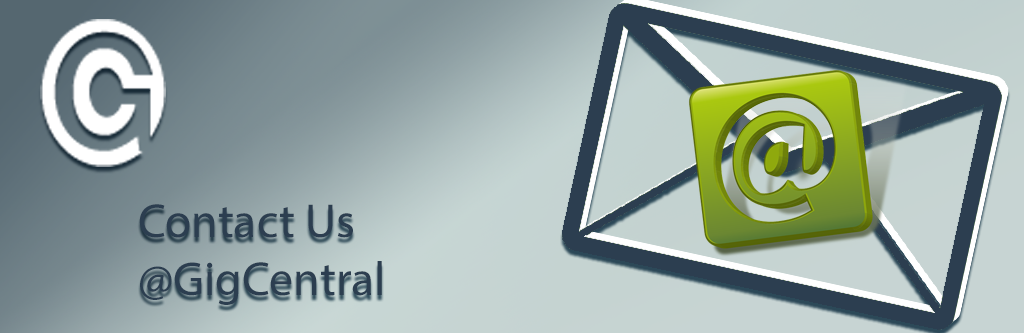
<style>
.page{position:relative;width:1024px;height:333px}
.page>*{position:absolute;margin:0}
.t1{font:48px "MyriadPro-Regular";color:#2c3e50}
</style>
<div class="page">
<p class="t1" style="left:139px;top:204px;width:243px;height:101px;text-align:justify">Contact Us<br>@GigCentral</p>
</div>
